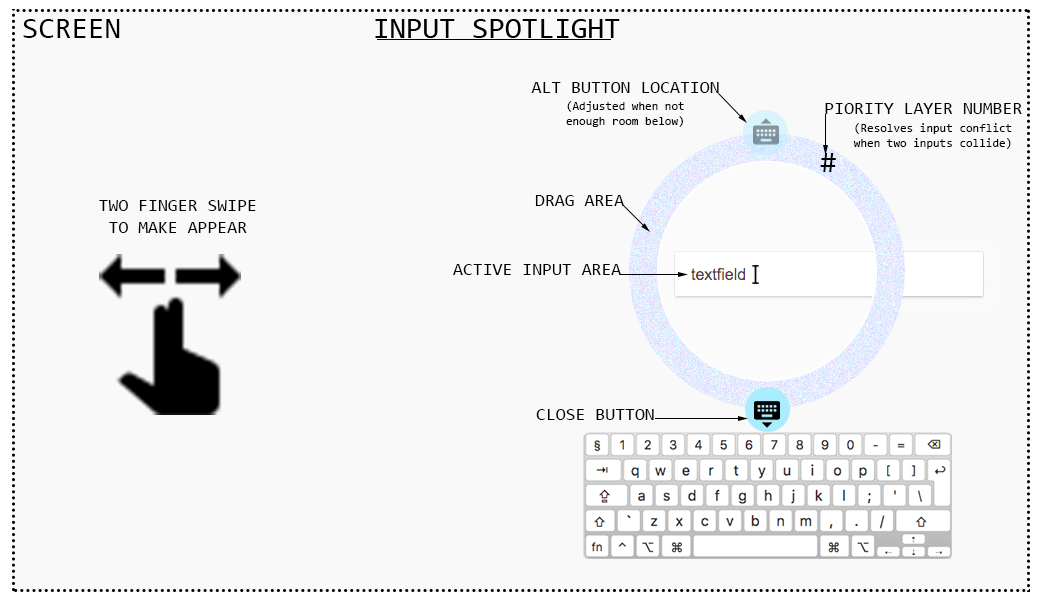
<style>
.page{position:relative;width:1040px;height:600px;background:#f9f9f9}
.page>*{position:absolute;margin:0}
.t1{font:30px "Consolas";color:#000000}
.t2{font:18px "Consolas";color:#000000}
.t3{font:12px "Consolas";color:#000000}
</style>
<div class="page">
<p class="t1" style="left:23px;top:19px;width:97px;height:19px">SCREEN</p>
<p class="t2" style="left:531px;top:82px;width:188px;height:11px">ALT BUTTON LOCATION</p>
<p class="t3" style="left:566px;top:101px;width:118px;height:26px">(Adjusted when not <br>enough room below)</p>
<p class="t2" style="left:825px;top:103px;width:197px;height:11px">PIORITY LAYER NUMBER</p>
<p class="t3" style="left:853px;top:123px;width:159px;height:26px">(Resolves input conflict <br>when two inputs collide)</p>
<p class="t1" style="left:820px;top:153px;width:16px;height:19px">#</p>
<p class="t2" style="left:535px;top:195px;width:89px;height:11px">DRAG AREA</p>
<p class="t2" style="left:99px;top:200px;width:157px;height:33px;text-align:center">TWO FINGER SWIPE<br>TO MAKE APPEAR</p>
<p class="t2" style="left:453px;top:264px;width:168px;height:11px">ACTIVE INPUT AREA</p>
<p class="t2" style="left:536px;top:409px;width:118px;height:11px">CLOSE BUTTON</p>
</div>
